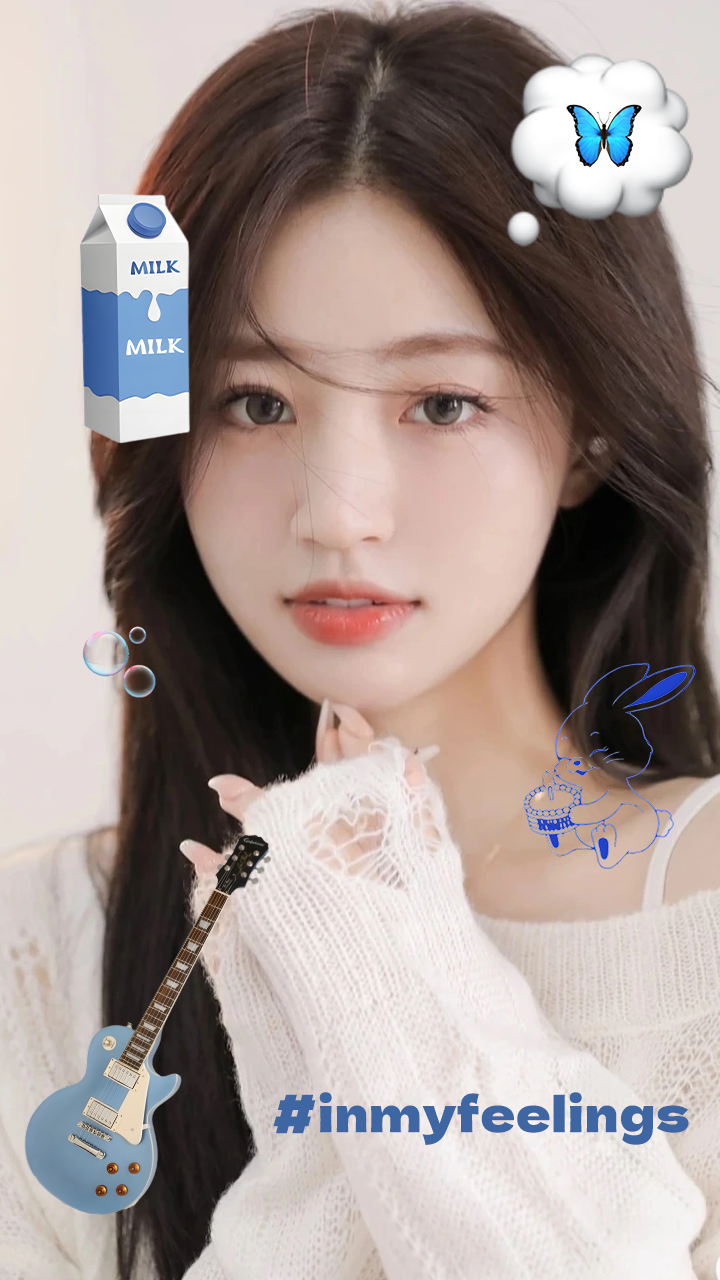
<style>
.page{position:relative;width:720px;height:1280px}
.page>*{position:absolute;margin:0}
.t1{font:48.2px "LogoSCUnboundedSans-Regular";letter-spacing:0.01em;color:#3e66a3}
</style>
<div class="page">
<p class="t1" style="left:273px;top:1092px;width:416px;height:53px">#inmyfeelings</p>
</div>
